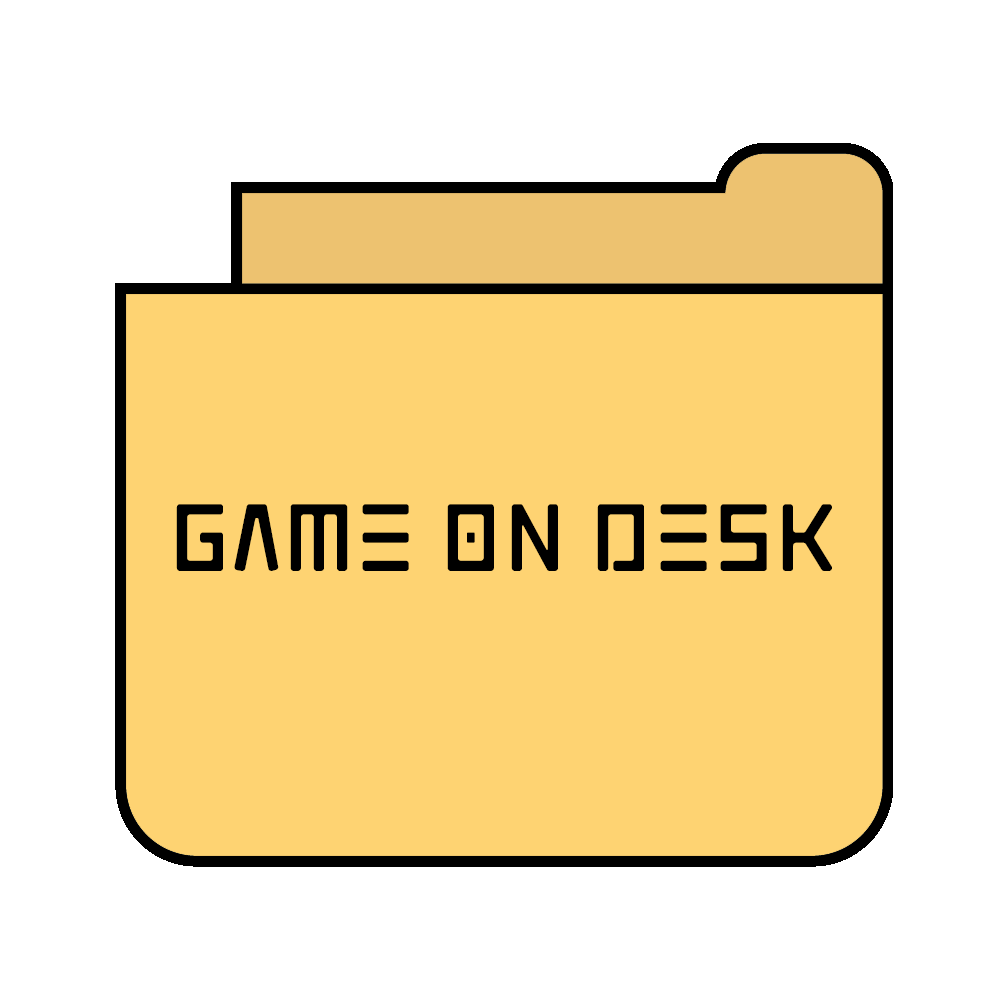
<style>
.page{position:relative;width:1007px;height:1007px;background:#ffffff}
.page>*{position:absolute;margin:0}
.t1{font:100px "Solaris";color:#000000}
</style>
<div class="page">
<p class="t1" style="left:176px;top:504px;width:656px;height:67px">Game on Desk</p>
</div>
